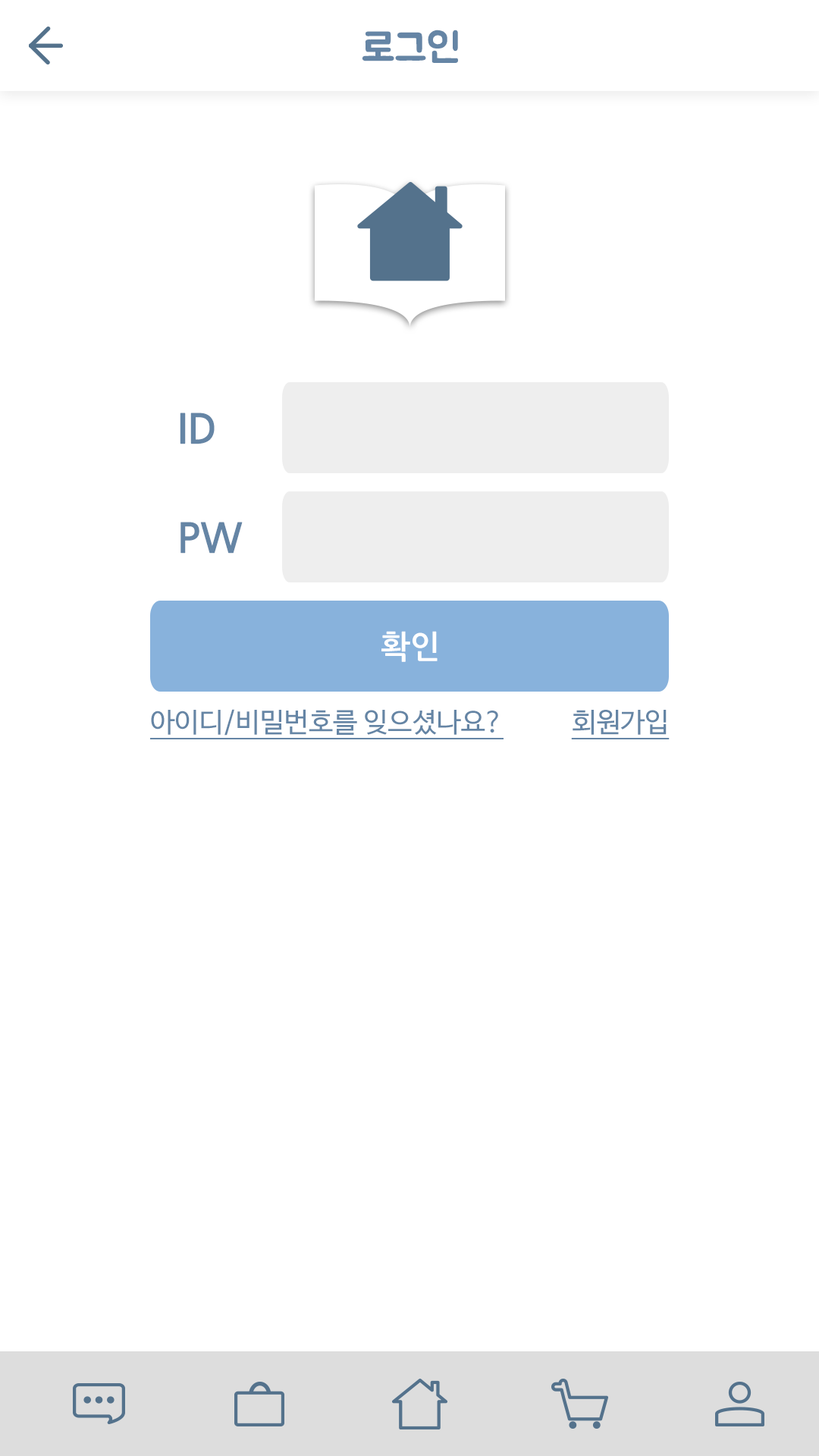
<style>
.page{position:relative;width:819px;height:1456px;background:#ffffff}
.page>*{position:absolute;margin:0}
.t1{font:40.9px "BMJUA";color:#6585a5}
.t2{font:40.9px "NanumGothicBold";color:#6585a5}
.t3{font:31.8px "NanumGothicBold";color:#ffffff}
.t4{font:27.3px "NanumBarunGothic";color:#6585a5;text-decoration:underline}
</style>
<div class="page">
<p class="t1" style="left:362px;top:30px;width:96px;height:33px">로그인</p>
<p class="t2" style="left:180px;top:413px;width:35px;height:31px">ID</p>
<p class="t2" style="left:180px;top:522px;width:63px;height:32px">PW</p>
<p class="t3" style="left:381px;top:631px;width:57px;height:31px">확인</p>
<p class="t4" style="left:150px;top:709px;width:354px;height:30px">아이디/비밀번호를 잊으셨나요?</p>
<p class="t4" style="left:571px;top:710px;width:99px;height:29px">회원가입</p>
</div>
